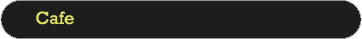
<style>
.page{position:relative;width:362px;height:39px;background:#1d1d1b}
.page>*{position:absolute;margin:0}
.t1{font:18px "Rockwell";color:#e1e164}
</style>
<div class="page">
<p class="t1" style="left:36px;top:11px;width:38px;height:14px">Cafe</p>
</div>
